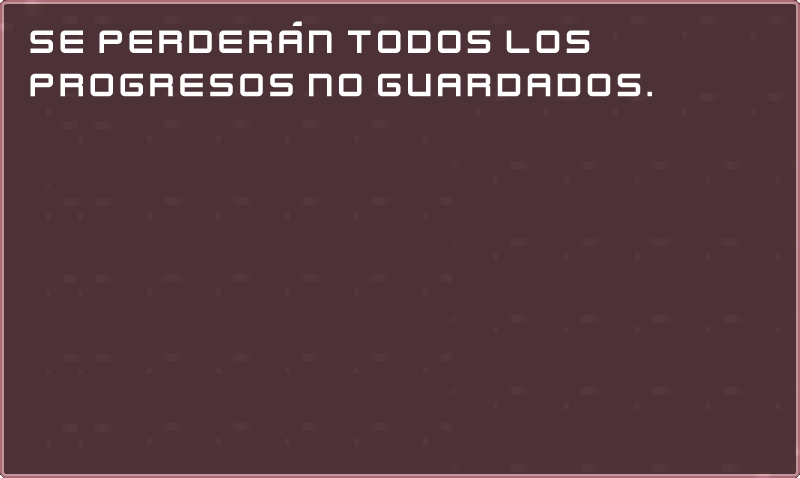
<style>
.page{position:relative;width:800px;height:478px;background:#4c3236}
.page>*{position:absolute;margin:0}
.t1{font:36px "KenVector-Future";color:#ffffff}
</style>
<div class="page">
<p class="t1" style="left:30px;top:21px;width:622px;height:76px">se perderán todos los <br>progresos no guardados.</p>
</div>
